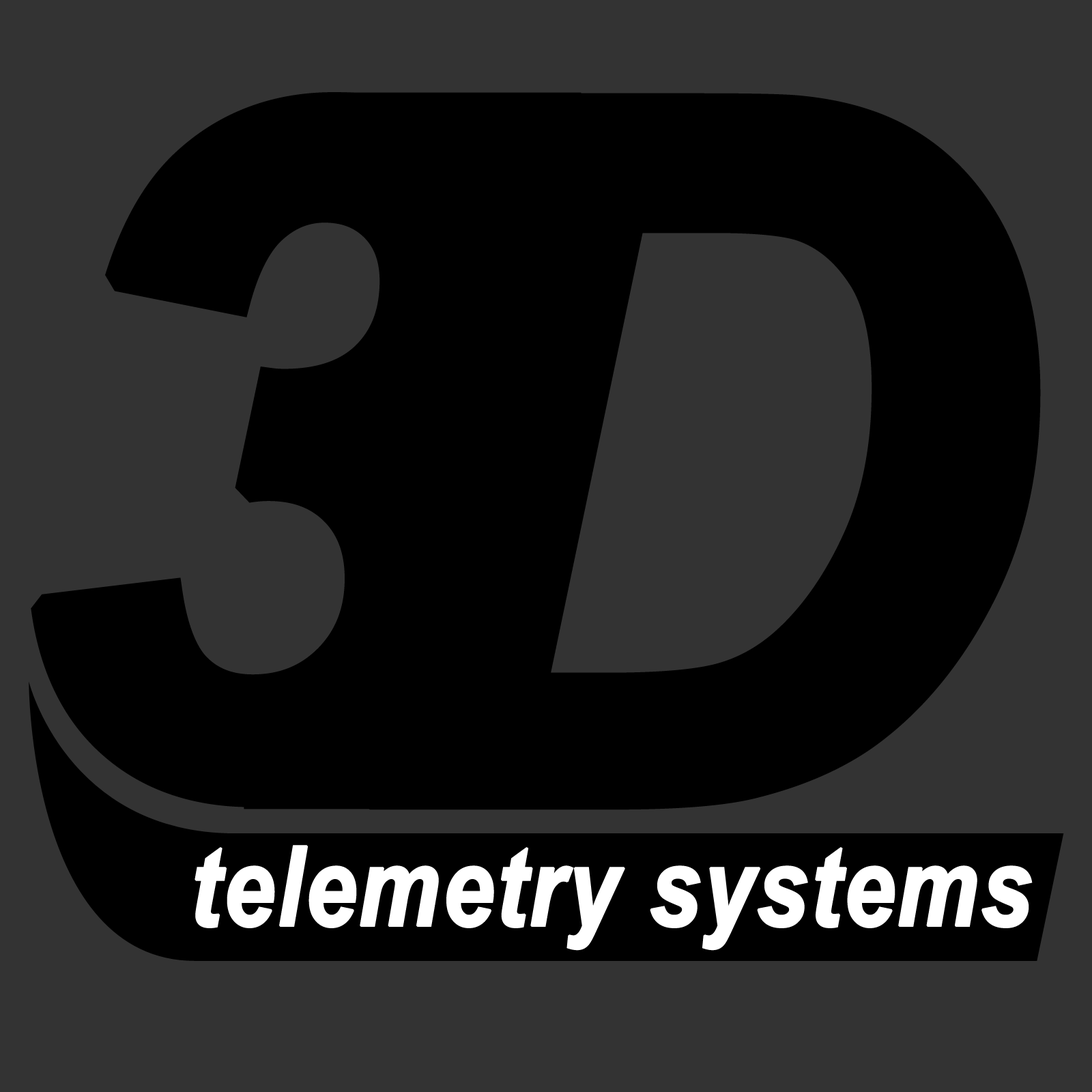
<style>
.page{position:relative;width:1092px;height:1092px;background:#333333}
.page>*{position:absolute;margin:0}
.t1{font:942.7px "Arial-BoldItalicMT";color:#000000;font-weight:bold}
.t2{font:964.8px "Arial-BoldItalicMT";color:#000000;font-weight:bold}
.t3{font:110.9px "ArialNarrow-BoldItalic";color:#ffffff;font-weight:bold}
</style>
<div class="page">
<p class="t1" style="left:31px;top:92px;width:505px;height:715px">3</p>
<p class="t2" style="left:357px;top:93px;width:684px;height:717px">D</p>
<p class="t3" style="left:195px;top:845px;width:838px;height:106px">telemetry systems</p>
</div>
